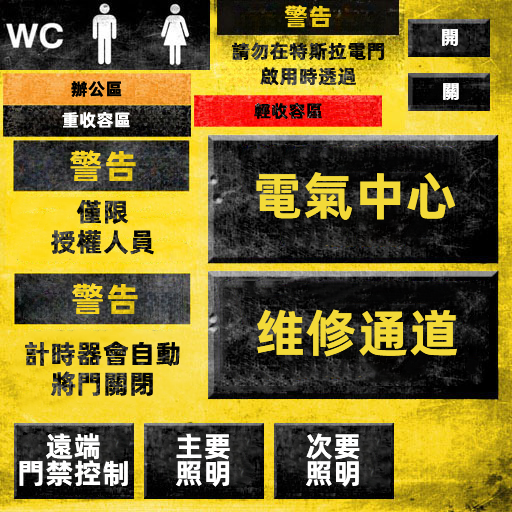
<style>
.page{position:relative;width:512px;height:512px}
.page>*{position:absolute;margin:0}
.t1{font:24.3px "AlibabaPuHuiTiB";letter-spacing:0.02em;color:#efce1b}
.t2{font:19.3px "AlibabaPuHuiTiB";letter-spacing:0.02em;color:#ffffff}
.t3{font:19.3px/25px "AlibabaPuHuiTiB";letter-spacing:0.02em}
.t4{font:17.3px "AlibabaPuHuiTiB";letter-spacing:0.02em;color:#000000}
.t5{font:17.3px "AlibabaPuHuiTiB";letter-spacing:0.02em;color:#ffffff}
.t6{font:34.3px "AlibabaPuHuiTiB";letter-spacing:0.02em;color:#f3d21d}
.t7{font:51.3px "AlibabaPuHuiTiB";letter-spacing:0.02em;color:#f3da38}
.t8{font:26.3px/30px "AlibabaPuHuiTiB";letter-spacing:0.02em}
.t9{font:34.3px "AlibabaPuHuiTiB";letter-spacing:0.02em;color:#f2d11b}
.t10{font:28.3px/27px "AlibabaPuHuiTiB";letter-spacing:0.02em;color:#ffffff}
</style>
<div class="page">
<p class="t1" style="left:284px;top:5px;width:47px;height:23px">警告</p>
<p class="t2" style="left:442px;top:29px;width:16px;height:17px">開</p>
<p class="t3" style="left:232px;top:42px;width:152px;height:44px;text-align:center">請勿在特斯拉電門<br>啟用時透過</p>
<p class="t4" style="left:71px;top:81px;width:51px;height:16px">辦公區</p>
<p class="t2" style="left:443px;top:83px;width:16px;height:17px">關</p>
<p class="t5" style="left:62px;top:112px;width:68px;height:16px">重收容區</p>
<p class="t4" style="left:254px;top:103px;width:68px;height:16px">輕收容區</p>
<p class="t6" style="left:70px;top:150px;width:66px;height:31px">警告</p>
<p class="t7" style="left:256px;top:172px;width:200px;height:48px">電氣中心</p>
<p class="t8" style="left:51px;top:199px;width:103px;height:56px;text-align:center">僅限<br>授權人員</p>
<p class="t9" style="left:72px;top:283px;width:66px;height:31px">警告</p>
<p class="t7" style="left:257px;top:309px;width:200px;height:48px">维修通道</p>
<p class="t8" style="left:25px;top:341px;width:155px;height:55px;text-align:center">計時器會自動<br>將門關閉</p>
<p class="t10" style="left:19px;top:433px;width:109px;height:54px;text-align:center">遠端<br>門禁控制</p>
<p class="t10" style="left:176px;top:433px;width:54px;height:54px">主要<br>照明</p>
<p class="t10" style="left:306px;top:433px;width:54px;height:54px">次要<br>照明</p>
</div>
